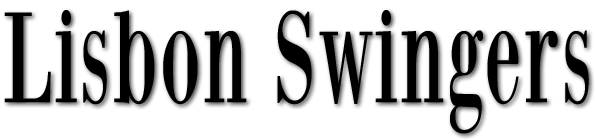
<style>
.page{position:relative;width:596px;height:140px;background:#ffffff}
.page>*{position:absolute;margin:0}
.t1{font:133.9px "BodoniXT";letter-spacing:0.025em;color:#000000;scale:0.61 1}
</style>
<div class="page">
<p class="t1" style="left:4px;top:10px;width:585px;height:124px">Lisbon Swingers</p>
</div>
